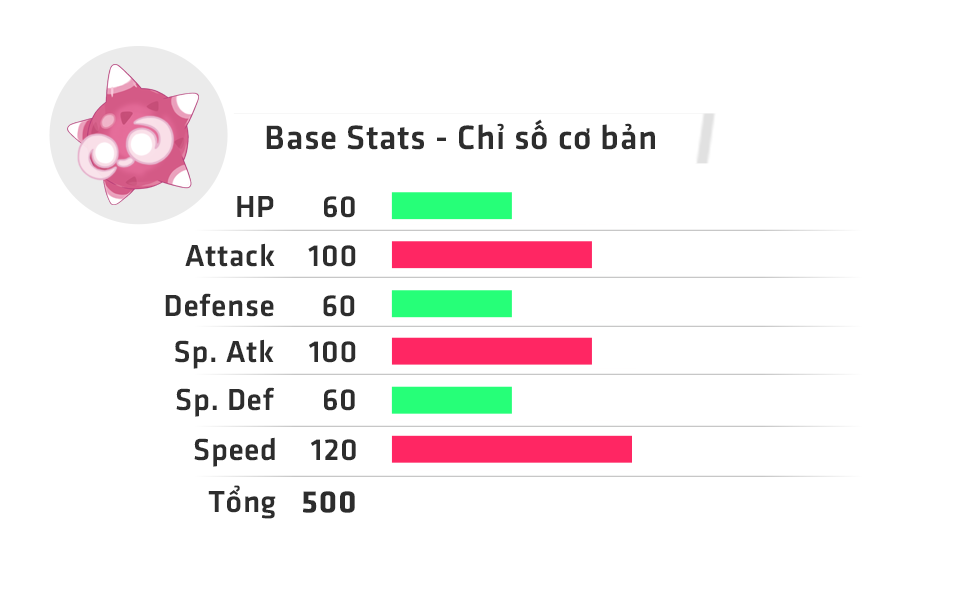
<style>
.page{position:relative;width:971px;height:593px;background:#ffffff}
.page>*{position:absolute;margin:0}
.t1{font:35px "UTM-Facebook-K&T";letter-spacing:0.02em;color:#2d2d2d}
.t2{font:31.6px "UTM-Facebook-K&T";letter-spacing:0.02em;color:#2d2d2d}
.t3{font:31.6px "UTM-Facebook-K&T";letter-spacing:0.02em;color:#2d2d2d;font-weight:bold}
</style>
<div class="page">
<p class="t1" style="left:266px;top:119px;width:389px;height:31px">Base Stats - Chỉ số cơ bản</p>
<p class="t2" style="left:237px;top:196px;width:37px;height:21px">HP</p>
<p class="t2" style="left:324px;top:196px;width:31px;height:22px">60</p>
<p class="t2" style="left:185px;top:243px;width:90px;height:24px">Attack</p>
<p class="t2" style="left:308px;top:245px;width:48px;height:22px">100</p>
<p class="t2" style="left:165px;top:293px;width:109px;height:24px">Defense</p>
<p class="t2" style="left:323px;top:295px;width:32px;height:22px">60</p>
<p class="t2" style="left:175px;top:339px;width:99px;height:30px">Sp. Atk</p>
<p class="t2" style="left:309px;top:341px;width:47px;height:22px">100</p>
<p class="t2" style="left:176px;top:387px;width:98px;height:30px">Sp. Def</p>
<p class="t2" style="left:324px;top:389px;width:31px;height:22px">60</p>
<p class="t2" style="left:194px;top:437px;width:81px;height:30px">Speed</p>
<p class="t2" style="left:311px;top:439px;width:45px;height:22px">120</p>
<p class="t2" style="left:208px;top:485px;width:68px;height:34px">Tổng</p>
<p class="t3" style="left:303px;top:491px;width:52px;height:22px">500</p>
</div>
